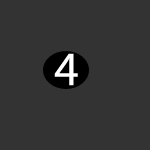
<style>
.page{position:relative;width:150px;height:150px;background:#333333}
.page>*{position:absolute;margin:0}
.t1{font:48px "MyriadPro-Regular";color:#ffffff}
</style>
<div class="page">
<p class="t1" style="left:54px;top:53px;width:24px;height:33px">4</p>
</div>
